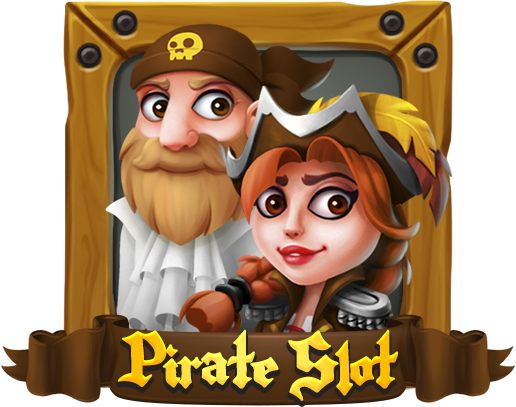
<style>
.page{position:relative;width:516px;height:407px;background:#ffffff}
.page>*{position:absolute;margin:0}
.t1{font:63.4px "WolfpackHalloweedRegular";letter-spacing:-0.05em}
</style>
<div class="page">
<p class="t1" style="left:118px;top:329px;width:280px;height:72px">Pirate Slot</p>
</div>
